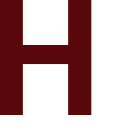
<style>
.page{position:relative;width:128px;height:128px;background:#ffffff}
.page>*{position:absolute;margin:0}
.t1{font:160px "Arial-BoldMT";color:#58080a}
</style>
<div class="page">
<p class="t1" style="left:0px;top:0px;width:92px;height:115px">H</p>
</div>
